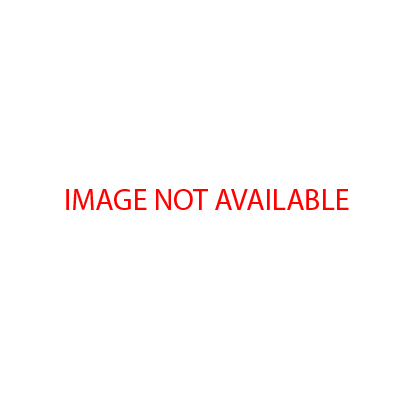
<style>
.page{position:relative;width:400px;height:400px;background:#ffffff}
.page>*{position:absolute;margin:0}
.t1{font:30px "MyriadPro-Regular";color:#ff0000}
</style>
<div class="page">
<p class="t1" style="left:66px;top:189px;width:283px;height:21px">IMAGE NOT AVAILABLE</p>
</div>
